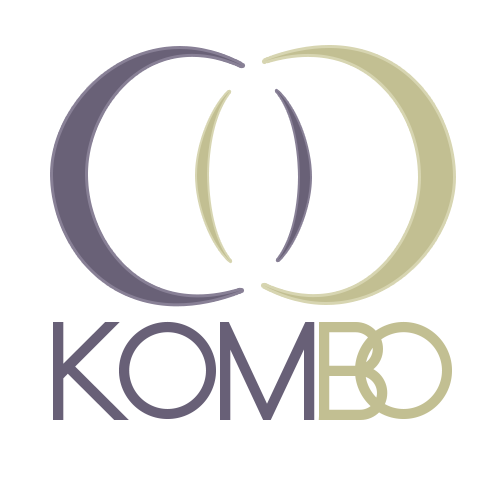
<style>
.page{position:relative;width:500px;height:500px;background:#ffffff}
.page>*{position:absolute;margin:0}
.t1{font:137.1px "Neou-Bold";letter-spacing:-0.05em;color:#686077}
.t2{font:137.1px "Neou-Bold";letter-spacing:-0.15em;color:#686077}
.t3{font:137.1px "Neou-Bold";letter-spacing:-0.32em;color:#c2bf92}
</style>
<div class="page">
<p class="t1" style="left:53px;top:321px;width:399px;height:99px"><span class="t2">K</span>om<span class="t3">bo</span></p>
</div>
